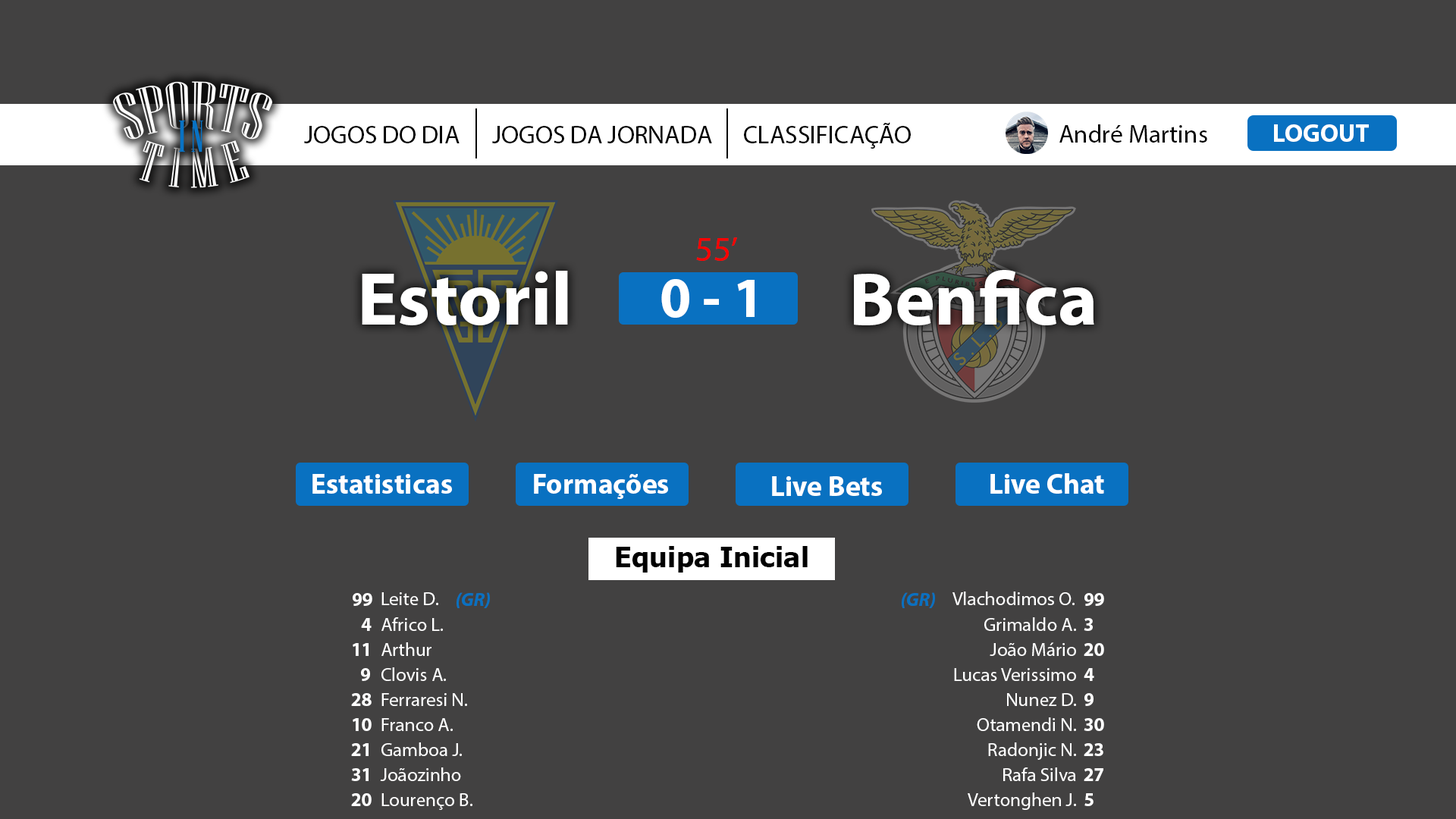
<style>
.page{position:relative;width:1456px;height:819px;background:#424141}
.page>*{position:absolute;margin:0}
.t1{font:25.3px "MyriadPro-Regular";color:#000000}
.t2{font:34.8px "MyriadPro-Regular";color:#ff0000}
.t3{font:75.8px "MyriadPro-Bold";color:#ffffff}
.t4{font:56.9px "MyriadPro-Bold";color:#ffffff}
.t5{font:28.4px "MyriadPro-Bold";color:#ffffff}
.t6{font:28.4px "Tahoma-Bold";color:#000000}
.t7{font:19px "MyriadPro-Bold";color:#ffffff}
.t8{font:19px "MyriadPro-Regular";color:#ffffff}
.t9{font:19px "MyriadPro-BoldIt";color:#0971c1}
</style>
<div class="page">
<p class="t1" style="left:304px;top:126px;width:156px;height:17px">JOGOS DO DIA</p>
<p class="t1" style="left:492px;top:126px;width:220px;height:17px">JOGOS DA JORNADA</p>
<p class="t1" style="left:744px;top:122px;width:167px;height:27px">CLASSIFICAÇÃO</p>
<p class="t1" style="left:1059px;top:124px;width:148px;height:19px">André Martins</p>
<p class="t2" style="left:696px;top:237px;width:41px;height:24px">55’</p>
<p class="t3" style="left:854px;top:270px;width:240px;height:55px">Benfica</p>
<p class="t3" style="left:362px;top:271px;width:206px;height:54px">Estoril</p>
<p class="t4" style="left:661px;top:279px;width:94px;height:39px">0 - 1</p>
<p class="t5" style="left:312px;top:474px;width:140px;height:20px">Estatisticas</p>
<p class="t5" style="left:534px;top:474px;width:134px;height:25px">Formações</p>
<p class="t5" style="left:990px;top:473px;width:114px;height:21px">Live Chat</p>
<p class="t5" style="left:772px;top:476px;width:110px;height:20px">Live Bets</p>
<p class="t6" style="left:616px;top:546px;width:192px;height:27px">Equipa Inicial</p>
<p class="t7" style="left:353px;top:593px;width:19px;height:13px">99</p>
<p class="t8" style="left:381px;top:592px;width:57px;height:13px">Leite D.</p>
<p class="t9" style="left:457px;top:592px;width:33px;height:16px">(GR)</p>
<p class="t9" style="left:902px;top:592px;width:33px;height:16px">(GR)</p>
<p class="t8" style="left:952px;top:591px;width:123px;height:14px">Vlachodimos O.</p>
<p class="t7" style="left:1084px;top:593px;width:20px;height:13px">99</p>
<p class="t8" style="left:381px;top:617px;width:62px;height:14px">Africo L.</p>
<p class="t8" style="left:984px;top:617px;width:92px;height:14px">Grimaldo A.</p>
<p class="t7" style="left:361px;top:618px;width:11px;height:13px">4</p>
<p class="t7" style="left:1084px;top:618px;width:9px;height:13px">3</p>
<p class="t7" style="left:353px;top:643px;width:16px;height:13px">11</p>
<p class="t8" style="left:381px;top:642px;width:50px;height:14px">Arthur</p>
<p class="t8" style="left:990px;top:642px;width:86px;height:14px">João Mário</p>
<p class="t7" style="left:1084px;top:643px;width:20px;height:13px">20</p>
<p class="t7" style="left:361px;top:668px;width:9px;height:13px">9</p>
<p class="t8" style="left:381px;top:667px;width:65px;height:14px">Clovis A.</p>
<p class="t8" style="left:954px;top:668px;width:122px;height:13px">Lucas Verissimo</p>
<p class="t7" style="left:1084px;top:668px;width:10px;height:13px">4</p>
<p class="t7" style="left:351px;top:693px;width:21px;height:13px">28</p>
<p class="t8" style="left:381px;top:693px;width:86px;height:13px">Ferraresi N.</p>
<p class="t8" style="left:1007px;top:693px;width:69px;height:13px">Nunez D.</p>
<p class="t7" style="left:1084px;top:693px;width:10px;height:13px">9</p>
<p class="t7" style="left:353px;top:718px;width:19px;height:13px">10</p>
<p class="t8" style="left:381px;top:718px;width:72px;height:13px">Franco A.</p>
<p class="t8" style="left:977px;top:717px;width:99px;height:14px">Otamendi N.</p>
<p class="t7" style="left:1084px;top:718px;width:20px;height:13px">30</p>
<p class="t7" style="left:351px;top:743px;width:18px;height:13px">21</p>
<p class="t8" style="left:381px;top:742px;width:81px;height:14px">Gamboa J.</p>
<p class="t8" style="left:988px;top:742px;width:88px;height:18px">Radonjic N.</p>
<p class="t7" style="left:1084px;top:743px;width:19px;height:13px">23</p>
<p class="t7" style="left:351px;top:768px;width:18px;height:13px">31</p>
<p class="t8" style="left:380px;top:767px;width:81px;height:14px">Joãozinho</p>
<p class="t8" style="left:1003px;top:767px;width:73px;height:14px">Rafa Silva</p>
<p class="t7" style="left:1084px;top:768px;width:19px;height:13px">27</p>
<p class="t7" style="left:351px;top:793px;width:21px;height:13px">20</p>
<p class="t8" style="left:381px;top:793px;width:91px;height:17px">Lourenço B.</p>
<p class="t8" style="left:968px;top:792px;width:108px;height:18px">Vertonghen J.</p>
<p class="t7" style="left:1084px;top:793px;width:10px;height:13px">5</p>
</div>
